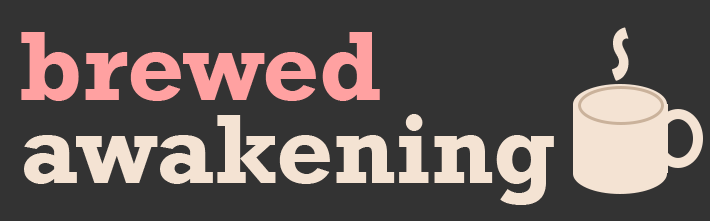
<style>
.page{position:relative;width:710px;height:221px;background:#333333}
.page>*{position:absolute;margin:0}
.t1{font:73.1px "BerlinSansFBDemi-Bold";color:#f4e3d3;scale:0.64 1}
.t2{font:100px/83.3px "Rockwell-Bold";color:#f4e3d3}
.t3{font:100px/83.3px "Rockwell-Bold";color:#ffa1a1}
</style>
<div class="page">
<p class="t1" style="left:612px;top:27px;width:17px;height:54px">S</p>
<p class="t2" style="left:21px;top:32px;width:533px;height:173px"><span class="t3">brewed<br></span>awakening</p>
</div>
